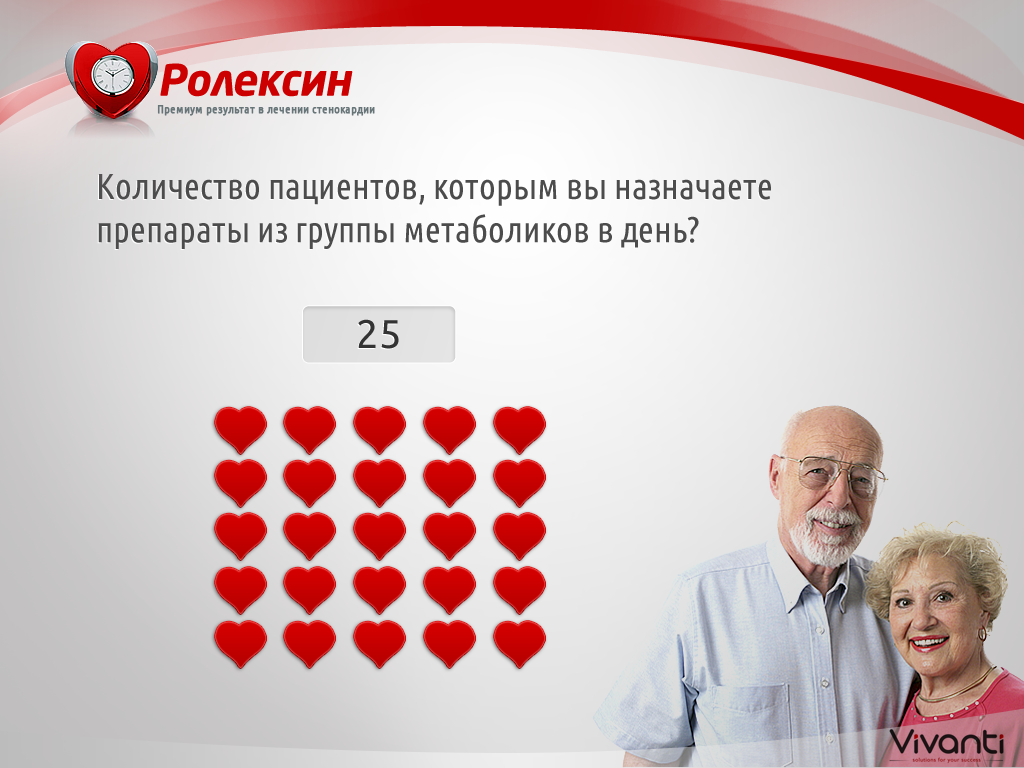
<style>
.page{position:relative;width:1024px;height:768px}
.page>*{position:absolute;margin:0}
.t1{font:43px "NeoSansPro-BoldItalic";letter-spacing:-0.015em;color:#cc0000}
.t2{font:12px "UbuntuCondensed-Regular";color:#677579;font-weight:bold}
.t3{font:36px/43.2px "UbuntuCondensed-Regular";color:#4d4c4c}
.t4{font:40px "Ubuntu";color:#333333}
</style>
<div class="page">
<p class="t1" style="left:160px;top:63px;width:193px;height:34px">Ролексин</p>
<p class="t2" style="left:157px;top:105px;width:218px;height:11px">Премиум результат в лечении стенокардии</p>
<p class="t3" style="left:98px;top:174px;width:673px;height:75px">Количество пациентов, которым вы назначаете<br>препараты из группы метаболиков в день?</p>
<p class="t4" style="left:358px;top:319px;width:41px;height:30px">25</p>
</div>
